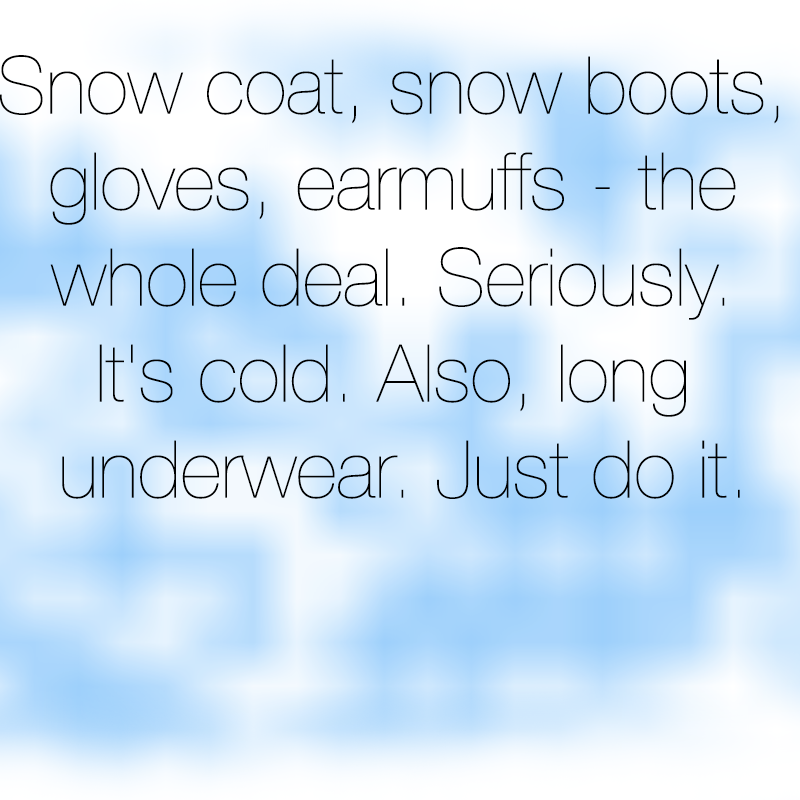
<style>
.page{position:relative;width:800px;height:800px}
.page>*{position:absolute;margin:0}
.t1{font:80px "HelveticaNeue-UltraLight";color:#000000}
</style>
<div class="page">
<p class="t1" style="left:0px;top:55px;width:779px;height:444px;text-align:center">Snow coat, snow boots, <br>gloves, earmuffs - the <br>whole deal. Seriously. <br>It's cold. Also, long <br>underwear. Just do it.</p>
</div>
